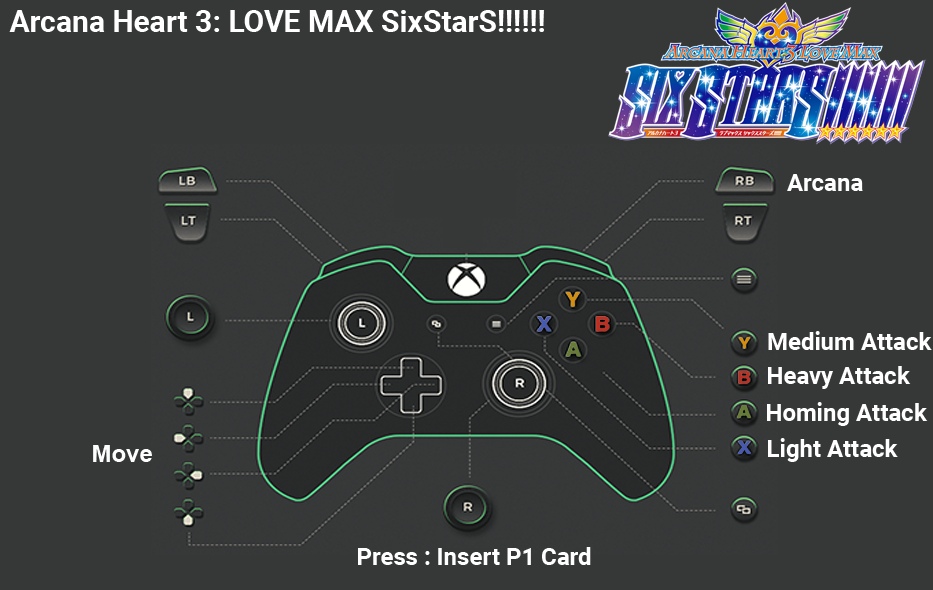
<style>
.page{position:relative;width:933px;height:590px;background:#363838}
.page>*{position:absolute;margin:0}
.t1{font:30px "Roboto-Bold";color:#ffffff}
.t2{font:24px "Roboto-Bold";color:#ffffff}
.t3{font:24px "Arial-BoldMT";color:#fefefe}
</style>
<div class="page">
<p class="t1" style="left:9px;top:10px;width:535px;height:22px">Arcana Heart 3: LOVE MAX SixStarS!!!!!!</p>
<p class="t2" style="left:787px;top:174px;width:76px;height:17px">Arcana</p>
<p class="t2" style="left:768px;top:331px;width:164px;height:19px">Medium Attack</p>
<p class="t2" style="left:768px;top:366px;width:143px;height:23px">Heavy Attack</p>
<p class="t2" style="left:767px;top:402px;width:161px;height:24px">Homing Attack</p>
<p class="t2" style="left:768px;top:438px;width:130px;height:24px">Light Attack</p>
<p class="t3" style="left:93px;top:445px;width:59px;height:17px">Move</p>
<p class="t2" style="left:358px;top:547px;width:233px;height:18px">Press : Insert P1 Card</p>
</div>
